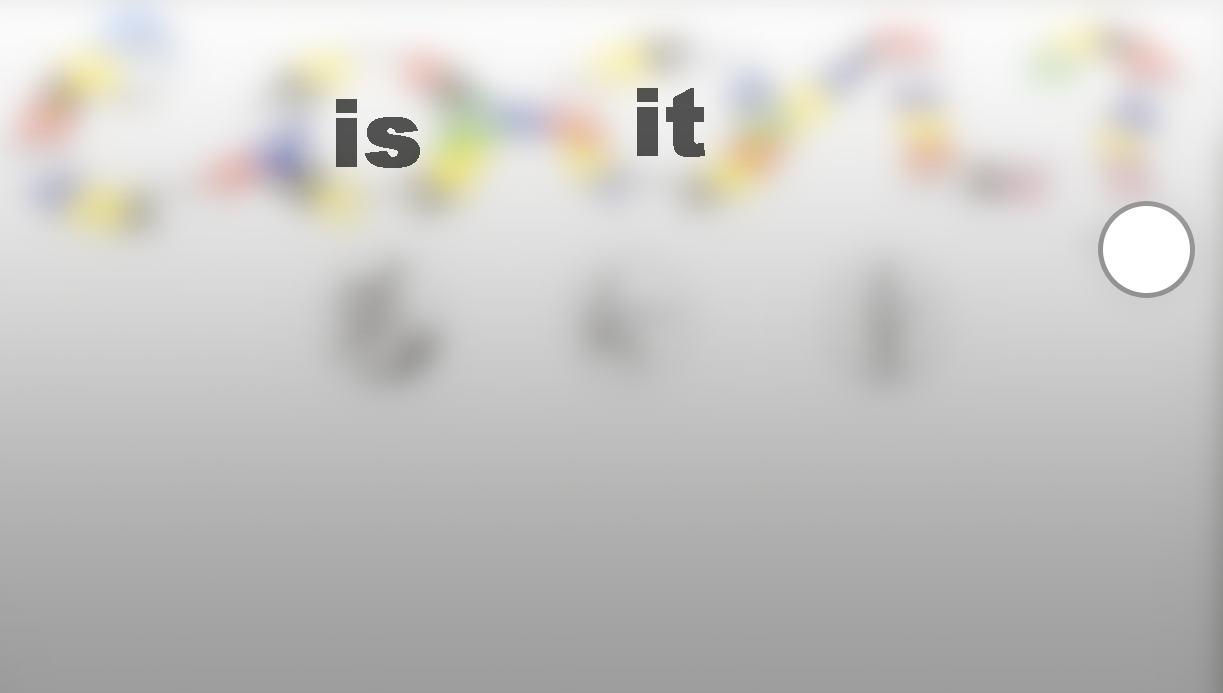
<style>
.page{position:relative;width:1223px;height:693px}
.page>*{position:absolute;margin:0}
.t1{font:92.7px "Arial-Black";color:#525252;font-weight:bold}
.t2{font:92.7px "Arial-Black";color:#515151;font-weight:bold}
</style>
<div class="page">
<p class="t1" style="left:637px;top:88px;width:68px;height:69px">it</p>
<p class="t2" style="left:336px;top:99px;width:84px;height:69px">is</p>
</div>
